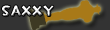
<style>
.page{position:relative;width:110px;height:30px;background:#333333}
.page>*{position:absolute;margin:0}
.t1{font:15px "TF2Build"}
</style>
<div class="page">
<p class="t1" style="left:2px;top:5px;width:52px;height:12px">SAxXY</p>
</div>
